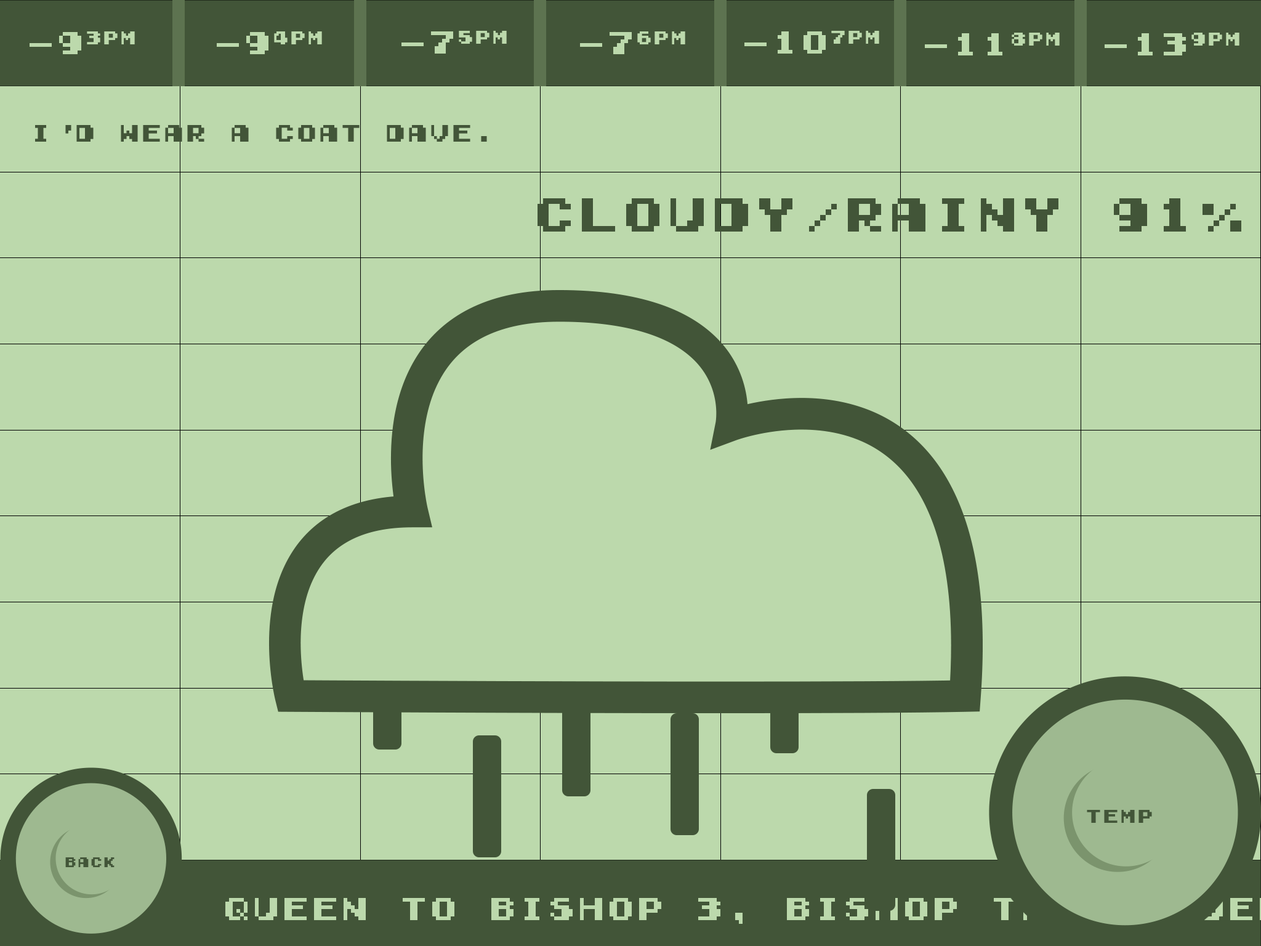
<style>
.page{position:relative;width:1261px;height:946px;background:#bcd9ac}
.page>*{position:absolute;margin:0}
.t1{font:29.6px "GamegirlClassic";color:#bcd9ac}
.t2{font:22.2px "GamegirlClassic";color:#425538}
.t3{font:44.3px "GamegirlClassic";color:#425538}
.t4{font:29.6px "GamegirlClassic";color:#425538}
</style>
<div class="page">
<p class="t1" style="left:30px;top:31px;width:105px;height:23px">-93pm</p>
<p class="t1" style="left:217px;top:31px;width:105px;height:23px">-94pm</p>
<p class="t1" style="left:401px;top:31px;width:106px;height:23px">-75pm</p>
<p class="t1" style="left:580px;top:31px;width:105px;height:23px">-76pm</p>
<p class="t1" style="left:744px;top:31px;width:135px;height:23px">-107pm</p>
<p class="t1" style="left:925px;top:33px;width:135px;height:22px">-118pm</p>
<p class="t1" style="left:1105px;top:33px;width:134px;height:22px">-139pm</p>
<p class="t2" style="left:35px;top:125px;width:452px;height:17px">I'd wear a coat dave.</p>
<p class="t3" style="left:537px;top:198px;width:704px;height:33px">CLOUDY/RAINY 91%</p>
<p class="t4" style="left:1087px;top:810px;width:65px;height:13px">TEMP</p>
<p class="t2" style="left:65px;top:857px;width:50px;height:10px">back</p>
</div>
